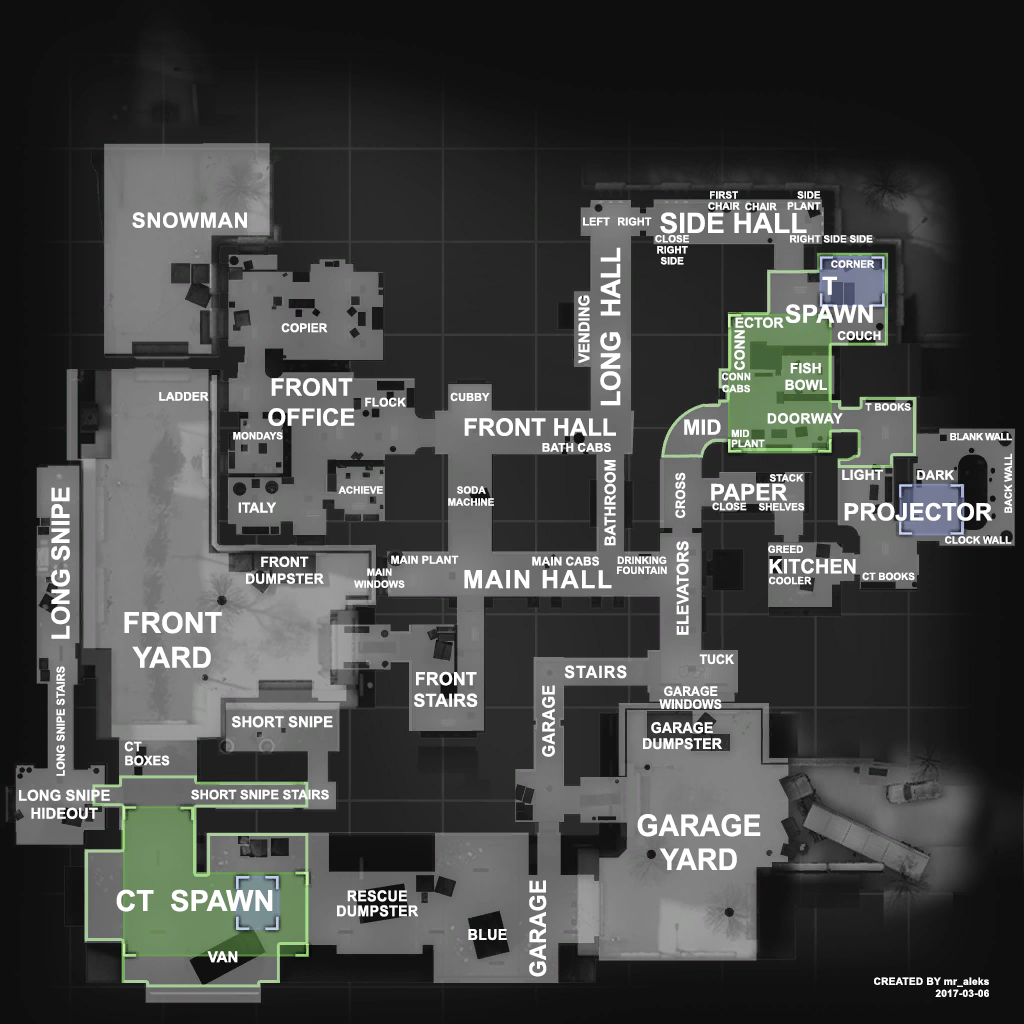
<style>
.page{position:relative;width:1024px;height:1024px}
.page>*{position:absolute;margin:0}
.t1{font:10px/11px "Arial-BoldMT";color:#ffffff;text-transform:uppercase}
.t2{font:10px "Arial-BoldMT";color:#ffffff;text-transform:uppercase}
.t3{font:21px "Arial-BoldMT";letter-spacing:0.03em;color:#ffffff;text-transform:uppercase}
.t4{font:11px "Arial-BoldMT";color:#ffffff;text-transform:uppercase}
.t5{font:28px "Arial-BoldMT";color:#ffffff}
.t6{font:27px "Arial-BoldMT";letter-spacing:-0.02em;color:#ffffff;text-transform:uppercase}
.t7{font:25px/28px "Arial-BoldMT";color:#ffffff;text-transform:uppercase}
.t8{font:15px "Arial-BoldMT";color:#ffffff;text-transform:uppercase}
.t9{font:14px "Arial-BoldMT";color:#ffffff;text-transform:uppercase}
.t10{font:12px "Arial-BoldMT";color:#ffffff;text-transform:uppercase}
.t11{font:24px/30px "Arial-BoldMT";color:#ffffff;text-transform:uppercase}
.t12{font:14px "Arial-BoldMT";letter-spacing:0.04em;color:#ffffff;text-transform:uppercase}
.t13{font:24px "Arial-BoldMT";color:#ffffff;text-transform:uppercase}
.t14{font:21px "Arial-BoldMT";color:#ffffff;text-transform:uppercase}
.t15{font:10px/10px "Arial-BoldMT";color:#ffffff;text-transform:uppercase}
.t16{font:10px "Arial-BoldMT";letter-spacing:-0.04em;color:#ffffff;text-transform:uppercase}
.t17{font:13px "Arial-BoldMT";color:#ffffff;text-transform:uppercase}
.t18{font:23px "Arial-BoldMT";color:#ffffff;text-transform:uppercase}
.t19{font:25px "Arial-BoldMT";color:#ffffff;text-transform:uppercase}
.t20{font:16px "Arial-BoldMT";color:#ffffff;text-transform:uppercase}
.t21{font:20px "Arial-BoldMT";color:#ffffff;text-transform:uppercase}
.t22{font:25px "Arial-BoldMT";letter-spacing:0.06em;color:#ffffff;text-transform:uppercase}
.t23{font:29px "Arial-BoldMT";color:#ffffff;text-transform:uppercase}
.t24{font:13px "Arial-BoldMT";color:#ffffff;text-transform:uppercase;scale:0.95 1}
.t25{font:17px "Arial-BoldMT";letter-spacing:0.06em;color:#ffffff;text-transform:uppercase;scale:0.95 1}
.t26{font:18px "Arial-BoldMT";color:#ffffff;text-transform:uppercase}
.t27{font:17px "Arial-BoldMT";letter-spacing:0.02em;color:#ffffff;text-transform:uppercase;scale:0.95 1}
.t28{font:13px/13px "Arial-BoldMT";color:#ffffff;text-transform:uppercase;scale:0.95 1}
.t29{font:15px/16px "Arial-BoldMT";color:#ffffff;text-transform:uppercase;scale:0.95 1}
.t30{font:13px/14px "Arial-BoldMT";color:#ffffff;text-transform:uppercase}
.t31{font:30px/34px "Arial-BoldMT";color:#ffffff;text-transform:uppercase;scale:0.95 1}
.t32{font:22.9px "Arial-BoldMT";letter-spacing:0.02em;color:#ffffff;text-transform:uppercase;scale:0.95 1}
.t33{font:15px/15px "Arial-BoldMT";letter-spacing:0.02em;color:#ffffff;text-transform:uppercase;scale:0.95 1}
.t34{font:15px "Arial-BoldMT";letter-spacing:0.02em;color:#ffffff;text-transform:uppercase;scale:0.95 1}
.t35{font:10px "Arial-BoldMT";letter-spacing:0.03em;color:#ffffff}
.t36{font:10px "Arial-BoldMT";letter-spacing:0.03em;color:#ffffff;text-transform:uppercase}
</style>
<div class="page">
<p class="t1" style="left:708px;top:191px;width:32px;height:19px;text-align:center">first<br>chair</p>
<p class="t1" style="left:787px;top:191px;width:34px;height:19px;text-align:right">side<br>plant</p>
<p class="t2" style="left:745px;top:202px;width:32px;height:9px">chair</p>
<p class="t3" style="left:132px;top:212px;width:115px;height:16px">snowman</p>
<p class="t4" style="left:583px;top:217px;width:27px;height:9px">left</p>
<p class="t4" style="left:618px;top:217px;width:34px;height:9px">right</p>
<p class="t5" style="left:660px;top:212px;width:147px;height:22px">SIDE HALL</p>
<p class="t1" style="left:655px;top:235px;width:34px;height:30px;text-align:center">close<br>right<br>side</p>
<p class="t2" style="left:790px;top:235px;width:83px;height:8px">right side side</p>
<p class="t6" style="left:600px;top:247px;width:21px;height:159px;rotate:-90deg">long  hall</p>
<p class="t2" style="left:831px;top:260px;width:44px;height:8px">corner</p>
<p class="t7" style="left:785px;top:276px;width:88px;height:47px;text-align:center">t<br>spawn</p>
<p class="t8" style="left:578px;top:295px;width:12px;height:69px;rotate:-90deg">vending</p>
<p class="t9" style="left:735px;top:317px;width:49px;height:11px">ector</p>
<p class="t10" style="left:281px;top:323px;width:47px;height:10px">copier</p>
<p class="t9" style="left:734px;top:330px;width:11px;height:40px;rotate:-90deg">conn</p>
<p class="t10" style="left:837px;top:331px;width:44px;height:10px">couch</p>
<p class="t9" style="left:785px;top:362px;width:42px;height:29px;text-align:center">fish<br>bowl</p>
<p class="t2" style="left:722px;top:372px;width:29px;height:21px;text-align:center">conn<br>cabs</p>
<p class="t11" style="left:268px;top:378px;width:87px;height:48px;text-align:center">front<br>office</p>
<p class="t10" style="left:159px;top:392px;width:50px;height:9px">ladder</p>
<p class="t10" style="left:365px;top:397px;width:41px;height:10px">flock</p>
<p class="t4" style="left:450px;top:392px;width:40px;height:10px">cubby</p>
<p class="t12" style="left:767px;top:413px;width:76px;height:11px">doorway</p>
<p class="t2" style="left:865px;top:403px;width:46px;height:8px">t books</p>
<p class="t13" style="left:464px;top:418px;width:152px;height:18px">front hall</p>
<p class="t14" style="left:684px;top:419px;width:37px;height:16px">mid</p>
<p class="t2" style="left:233px;top:432px;width:50px;height:8px">mondays</p>
<p class="t15" style="left:731px;top:429px;width:34px;height:19px">mid<br>plant</p>
<p class="t16" style="left:950px;top:433px;width:62px;height:8px">blank wall</p>
<p class="t10" style="left:542px;top:443px;width:69px;height:9px">bath cabs</p>
<p class="t8" style="left:604px;top:460px;width:12px;height:86px;rotate:-90deg">bathroom</p>
<p class="t2" style="left:1004px;top:453px;width:8px;height:60px;rotate:-90deg">back wall</p>
<p class="t17" style="left:675px;top:472px;width:11px;height:46px;rotate:-90deg">cross</p>
<p class="t9" style="left:842px;top:469px;width:41px;height:11px">light</p>
<p class="t17" style="left:917px;top:470px;width:37px;height:10px">dark</p>
<p class="t2" style="left:338px;top:486px;width:45px;height:8px">achieve</p>
<p class="t2" style="left:448px;top:486px;width:46px;height:20px;text-align:center">soda<br>machine</p>
<p class="t18" style="left:711px;top:483px;width:77px;height:18px">paper</p>
<p class="t2" style="left:769px;top:474px;width:35px;height:8px">stack</p>
<p class="t19" style="left:51px;top:487px;width:19px;height:152px;rotate:-90deg">long snipe</p>
<p class="t9" style="left:238px;top:502px;width:39px;height:11px">italy</p>
<p class="t2" style="left:712px;top:502px;width:35px;height:9px">close</p>
<p class="t2" style="left:758px;top:503px;width:47px;height:8px">shelves</p>
<p class="t13" style="left:844px;top:502px;width:149px;height:19px">projector</p>
<p class="t20" style="left:676px;top:541px;width:13px;height:94px;rotate:-90deg">elevators</p>
<p class="t2" style="left:768px;top:545px;width:35px;height:8px">greed</p>
<p class="t2" style="left:945px;top:536px;width:67px;height:8px">clock wall</p>
<p class="t9" style="left:246px;top:556px;width:78px;height:28px;text-align:center">front<br>dumpster</p>
<p class="t4" style="left:391px;top:555px;width:68px;height:9px">main plant</p>
<p class="t10" style="left:532px;top:556px;width:67px;height:10px">main cabs</p>
<p class="t15" style="left:617px;top:556px;width:50px;height:19px;text-align:center">drinking<br>fountain</p>
<p class="t21" style="left:769px;top:558px;width:87px;height:16px">kitchen</p>
<p class="t2" style="left:354px;top:568px;width:51px;height:20px;text-align:center">main<br>windows</p>
<p class="t22" style="left:464px;top:570px;width:148px;height:19px">main hall</p>
<p class="t2" style="left:769px;top:576px;width:43px;height:9px">cooler</p>
<p class="t2" style="left:862px;top:572px;width:53px;height:9px">ct books</p>
<p class="t23" style="left:124px;top:611px;width:98px;height:57px;text-align:center">front<br>yard</p>
<p class="t24" style="left:699px;top:654px;width:35px;height:11px">tuck</p>
<p class="t25" style="left:564px;top:665px;width:63px;height:14px">stairs</p>
<p class="t4" style="left:56px;top:666px;width:9px;height:110px;rotate:-90deg">long snipe stairs</p>
<p class="t26" style="left:414px;top:671px;width:64px;height:36px;text-align:center">front<br>stairs</p>
<p class="t27" style="left:542px;top:685px;width:13px;height:72px;rotate:-90deg">garage</p>
<p class="t28" style="left:659px;top:686px;width:63px;height:23px;text-align:center">garage<br>windows</p>
<p class="t8" style="left:231px;top:716px;width:102px;height:12px">short snipe</p>
<p class="t29" style="left:643px;top:722px;width:79px;height:28px;text-align:center">garage<br>dumpster</p>
<p class="t30" style="left:124px;top:741px;width:46px;height:25px">ct<br>boxes</p>
<p class="t8" style="left:19px;top:789px;width:91px;height:30px;text-align:center">long snipe<br>hideout</p>
<p class="t17" style="left:191px;top:789px;width:138px;height:11px">short snipe stairs</p>
<p class="t31" style="left:637px;top:814px;width:124px;height:56px;text-align:center">garage<br>yard</p>
<p class="t32" style="left:529px;top:880px;width:18px;height:97px;rotate:-90deg">garage</p>
<p class="t23" style="left:116px;top:889px;width:157px;height:23px">CT  SPAWN</p>
<p class="t33" style="left:337px;top:890px;width:82px;height:27px;text-align:center">rescue<br>dumpster</p>
<p class="t34" style="left:468px;top:929px;width:39px;height:12px">blue</p>
<p class="t8" style="left:207px;top:951px;width:31px;height:12px">van</p>
<p class="t35" style="left:874px;top:977px;width:115px;height:20px;text-align:right"><span class="t36">created by </span>mr_aleks<br>2017-03-06</p>
</div>
